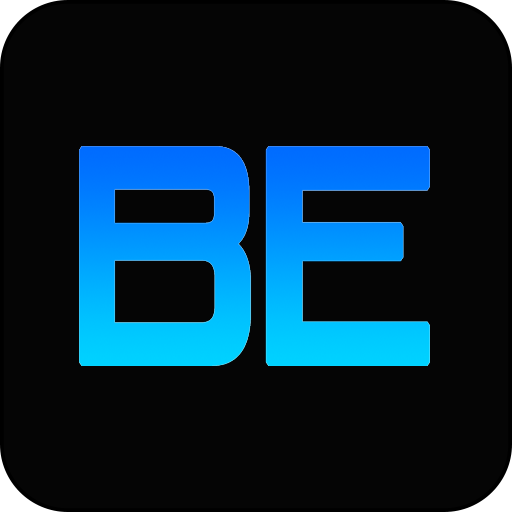
<style>
.page{position:relative;width:512px;height:512px;background:#050505}
.page>*{position:absolute;margin:0}
.t1{font:289.6px "VenusRisingRg-Regular";letter-spacing:-0.05em;font-weight:bold;scale:0.65 1}
</style>
<div class="page">
<p class="t1" style="left:79px;top:146px;width:351px;height:220px">BE</p>
</div>
